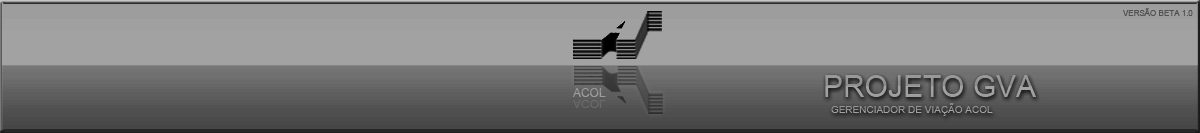
<style>
.page{position:relative;width:1200px;height:133px;background:#a2a2a2}
.page>*{position:absolute;margin:0}
.t1{font:8px "ArialMT";color:#505050}
.t2{font:30px "ArialMT";color:#989898}
.t3{font:12px "ArialMT";color:#9d9d9d}
.t4{font:10.7px "ArialMT";color:#6a6a6a;scale:1.12 1}
.t5{font:10px "ArialMT";color:#929292}
</style>
<div class="page">
<p class="t1" style="left:1123px;top:8px;width:70px;height:8px">VERSÃO BETA 1.0</p>
<p class="t2" style="left:825px;top:75px;width:212px;height:22px">PROJETO GVA</p>
<p class="t3" style="left:573px;top:88px;width:33px;height:9px">ACOL</p>
<p class="t4" style="left:573px;top:100px;width:33px;height:8px">ACOL</p>
<p class="t5" style="left:831px;top:103px;width:162px;height:13px">GERENCIADOR DE VIAÇÃO ACOL</p>
</div>
